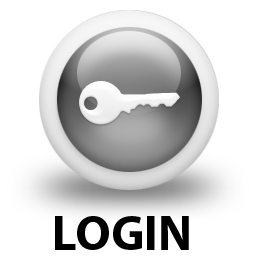
<style>
.page{position:relative;width:256px;height:256px;background:#ffffff}
.page>*{position:absolute;margin:0}
.t1{font:49px "MyriadPro-Bold";color:#000000}
</style>
<div class="page">
<p class="t1" style="left:55px;top:216px;width:134px;height:34px">LOGIN</p>
</div>
